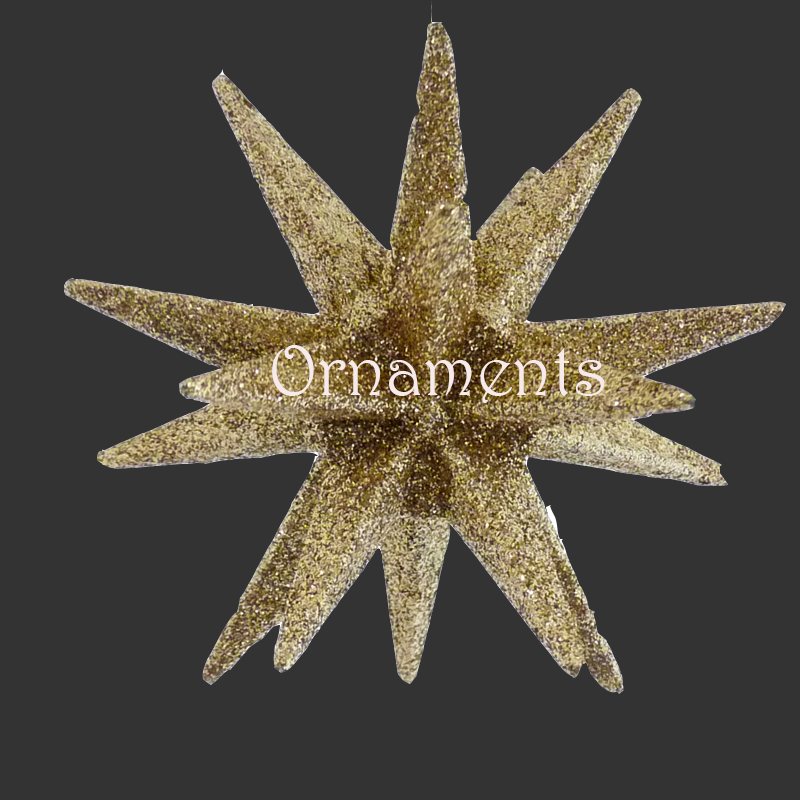
<style>
.page{position:relative;width:800px;height:800px;background:#333333}
.page>*{position:absolute;margin:0}
.t1{font:72px "Harrington";color:#f7eaea}
</style>
<div class="page">
<p class="t1" style="left:272px;top:345px;width:333px;height:58px">Ornaments</p>
</div>
